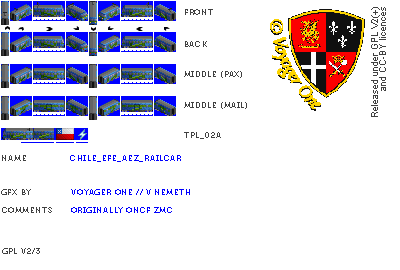
<style>
.page{position:relative;width:400px;height:270px;background:#ffffff}
.page>*{position:absolute;margin:0}
.t1{font:8px "Museo700-Regular";letter-spacing:0.075em;color:#404040;text-transform:uppercase}
.t2{font:8px "Museo700-Regular";letter-spacing:0.075em;color:#0000ff;text-transform:uppercase}
</style>
<div class="page">
<p class="t1" style="left:185px;top:9px;width:28px;height:6px">front</p>
<p class="t1" style="left:185px;top:41px;width:22px;height:6px">back</p>
<p class="t1" style="left:184px;top:71px;width:58px;height:7px">middle (pax)</p>
<p class="t1" style="left:184px;top:102px;width:63px;height:7px">middle (mail)</p>
<p class="t1" style="left:184px;top:132px;width:37px;height:7px">tpl_02a</p>
<p class="t1" style="left:2px;top:155px;width:24px;height:6px">name</p>
<p class="t2" style="left:70px;top:155px;width:111px;height:7px">Chile_EFE_AEZ_Railcar</p>
<p class="t1" style="left:1px;top:189px;width:30px;height:6px">gfx by</p>
<p class="t2" style="left:71px;top:189px;width:119px;height:6px">voyager one // v nemeth</p>
<p class="t1" style="left:2px;top:207px;width:50px;height:6px">comments</p>
<p class="t2" style="left:71px;top:207px;width:101px;height:6px">originally oncf zmc</p>
<p class="t1" style="left:2px;top:248px;width:38px;height:6px">gpl v2/3</p>
</div>
